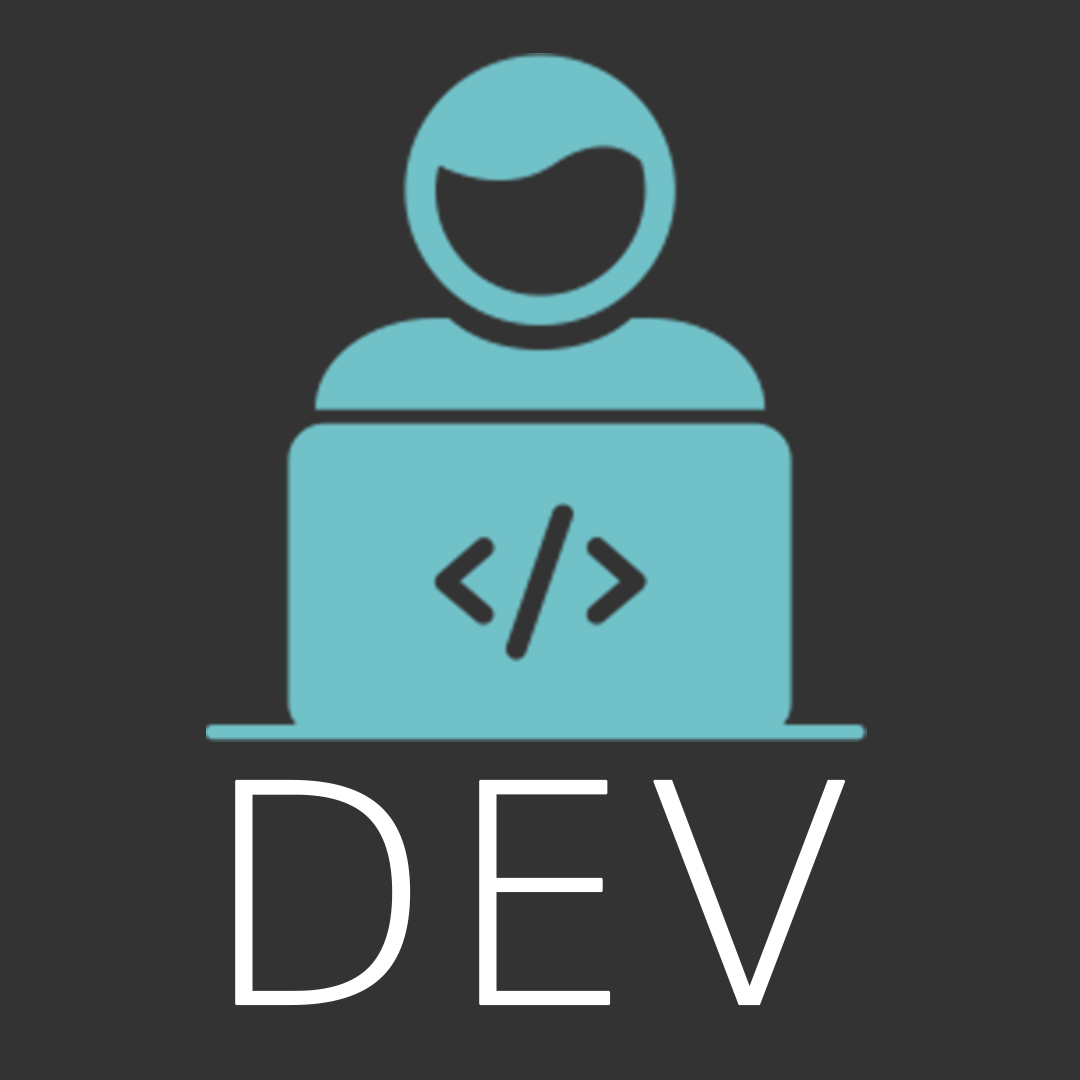
<style>
.page{position:relative;width:1080px;height:1080px;background:#333333}
.page>*{position:absolute;margin:0}
.t1{font:306.3px "DejaVuSans-ExtraLight";color:#ffffff;text-transform:uppercase;font-weight:bold}
</style>
<div class="page">
<p class="t1" style="left:235px;top:779px;width:611px;height:227px">Dev</p>
</div>
